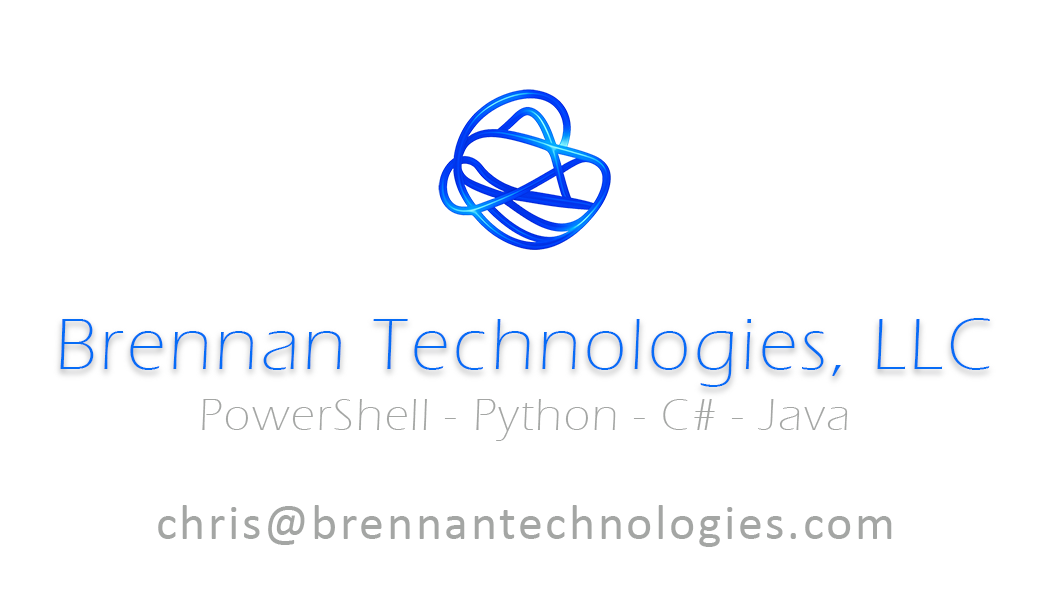
<style>
.page{position:relative;width:1050px;height:600px;background:#ffffff}
.page>*{position:absolute;margin:0}
.t1{font:75px "ErasITC-Light";letter-spacing:0.05em;color:#076cf6}
.t2{font:45.8px "ErasITC-Light";letter-spacing:0.05em;color:#a4a6a4}
.t3{font:50px "Calibri";letter-spacing:0.05em;color:#a4a6a4}
</style>
<div class="page">
<p class="t1" style="left:60px;top:318px;width:930px;height:69px">Brennan Technologies, LLC</p>
<p class="t2" style="left:202px;top:399px;width:646px;height:42px">PowerShell - Python - C# - Java</p>
<p class="t3" style="left:158px;top:505px;width:734px;height:42px">chris@brennantechnologies.com</p>
</div>
